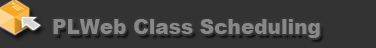
<style>
.page{position:relative;width:376px;height:48px;background:#333333}
.page>*{position:absolute;margin:0}
.t1{font:20px "Arial-Black";color:#888888}
</style>
<div class="page">
<p class="t1" style="left:53px;top:19px;width:267px;height:19px">PLWeb Class Scheduling</p>
</div>
